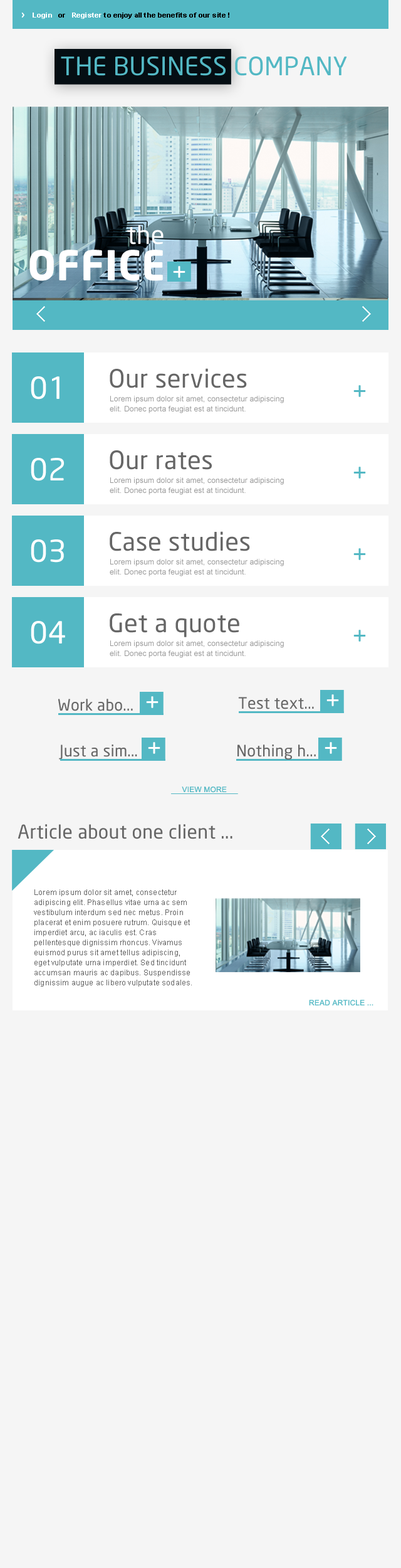
<style>
.page{position:relative;width:401px;height:1568px;background:#f5f5f5}
.page>*{position:absolute;margin:0}
.t1{font:11.4px "GothamRounded-Medium";color:#ffffff}
.t2{font:6.9px "Arial-BoldMT";letter-spacing:0.014em;color:#000000}
.t3{font:6.9px "Arial-BoldMT";letter-spacing:0.014em;color:#ffffff}
.t4{font:25.1px "NeoSans";letter-spacing:0.014em;color:#53b8c4}
.t5{font:25.1px "NeoSans";letter-spacing:0.014em;color:#ffffff}
.t6{font:40.8px "NeoSans-Bold";letter-spacing:0.014em;color:#ffffff}
.t7{font:30.1px "NeoSans";letter-spacing:0.014em;color:#ffffff}
.t8{font:25.1px "NeoSans";letter-spacing:0.014em;color:#666666}
.t9{font:7.5px/10px "ArialMT";letter-spacing:0.014em;color:#999999}
.t10{font:15.7px "NeoSans";letter-spacing:0.014em;color:#666666}
.t11{font:7.5px "ArialMT";letter-spacing:0.014em;color:#53b8c4;text-decoration:underline}
.t12{font:18.8px "NeoSans";letter-spacing:0.014em;color:#666666}
.t13{font:7.5px/10px "ArialMT";letter-spacing:0.014em;color:#666666}
.t14{font:7.5px "ArialMT";letter-spacing:0.014em;color:#53b8c4}
</style>
<div class="page">
<p class="t1" style="left:21px;top:13px;width:3px;height:5px">›</p>
<p class="t2" style="left:33px;top:13px;width:197px;height:6px"><span class="t3">Login   </span>or   <span class="t3">Register </span>to enjoy all the benefits of our site !</p>
<p class="t4" style="left:61px;top:56px;width:286px;height:20px">THE BUSINESS COMPANY</p>
<p class="t5" style="left:127px;top:225px;width:37px;height:20px">the</p>
<p class="t6" style="left:29px;top:250px;width:134px;height:31px">OFFICE</p>
<p class="t5" style="left:173px;top:266px;width:13px;height:12px">+</p>
<p class="t7" style="left:31px;top:376px;width:29px;height:24px">01</p>
<p class="t8" style="left:110px;top:368px;width:137px;height:20px">Our services</p>
<p class="t4" style="left:354px;top:385px;width:12px;height:12px">+</p>
<p class="t9" style="left:110px;top:396px;width:174px;height:17px">Lorem ipsum dolor sit amet, consectetur adipiscing<br>elit. Donec porta feugiat est at tincidunt.</p>
<p class="t7" style="left:31px;top:458px;width:33px;height:23px">02</p>
<p class="t8" style="left:110px;top:450px;width:102px;height:20px">Our rates</p>
<p class="t4" style="left:354px;top:467px;width:12px;height:12px">+</p>
<p class="t9" style="left:110px;top:477px;width:174px;height:18px">Lorem ipsum dolor sit amet, consectetur adipiscing<br>elit. Donec porta feugiat est at tincidunt.</p>
<p class="t8" style="left:110px;top:531px;width:140px;height:20px">Case studies</p>
<p class="t7" style="left:31px;top:539px;width:33px;height:24px">03</p>
<p class="t4" style="left:354px;top:548px;width:12px;height:12px">+</p>
<p class="t9" style="left:110px;top:559px;width:174px;height:17px">Lorem ipsum dolor sit amet, consectetur adipiscing<br>elit. Donec porta feugiat est at tincidunt.</p>
<p class="t8" style="left:110px;top:613px;width:130px;height:24px">Get a quote</p>
<p class="t7" style="left:31px;top:621px;width:34px;height:23px">04</p>
<p class="t4" style="left:354px;top:630px;width:12px;height:12px">+</p>
<p class="t9" style="left:110px;top:640px;width:174px;height:18px">Lorem ipsum dolor sit amet, consectetur adipiscing<br>elit. Donec porta feugiat est at tincidunt.</p>
<p class="t10" style="left:58px;top:699px;width:75px;height:12px">Work abo...</p>
<p class="t5" style="left:146px;top:696px;width:13px;height:12px">+</p>
<p class="t10" style="left:238px;top:697px;width:76px;height:12px">Test text...</p>
<p class="t5" style="left:327px;top:694px;width:12px;height:12px">+</p>
<p class="t10" style="left:59px;top:744px;width:78px;height:16px">Just a sim...</p>
<p class="t5" style="left:148px;top:742px;width:13px;height:12px">+</p>
<p class="t10" style="left:238px;top:744px;width:78px;height:16px">Nothing h...</p>
<p class="t5" style="left:325px;top:742px;width:12px;height:12px">+</p>
<p class="t11" style="left:171px;top:787px;width:67px;height:7px">VIEW MORE</p>
<p class="t12" style="left:18px;top:824px;width:215px;height:15px">Article about one client ...</p>
<p class="t13" style="left:34px;top:889px;width:158px;height:98px">Lorem ipsum dolor sit amet, consectetur adipiscing elit. Phasellus vitae urna ac sem vestibulum interdum sed nec metus. Proin placerat et enim posuere rutrum. Quisque et imperdiet arcu, ac iaculis est. Cras pellentesque dignissim rhoncus. Vivamus euismod purus sit amet tellus adipiscing, eget vulputate urna imperdiet. Sed tincidunt accumsan mauris ac dapibus. Suspendisse dignissim augue ac libero vulputate sodales.</p>
<p class="t14" style="left:309px;top:1000px;width:65px;height:6px">READ ARTICLE ...</p>
</div>
